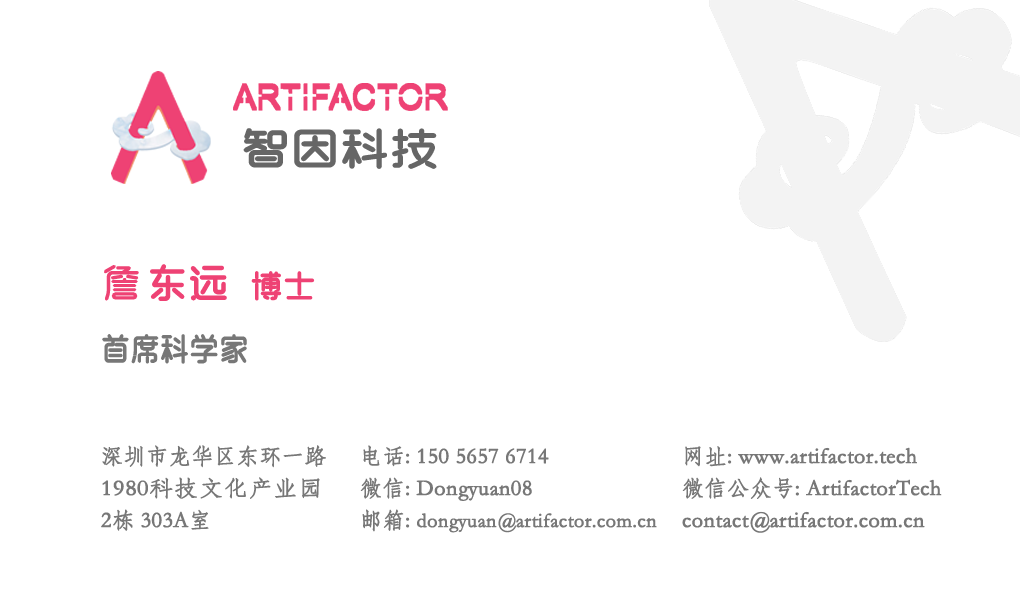
<style>
.page{position:relative;width:1020px;height:612px;background:#ffffff}
.page>*{position:absolute;margin:0}
.t1{font:44px "BENMOXuyuan";color:#666666;font-weight:bold;scale:1.1 1}
.t2{font:32px "BENMOXuyuan";color:#777777;font-weight:bold;scale:0.9 1}
.t3{font:40px "BENMOXuyuan";color:#ee4274}
.t4{font:40px "BENMOXuyuan";color:#ee4274;font-weight:bold}
.t5{font:32px "BENMOXuyuan";color:#ee4274;font-weight:bold}
.t6{font:22px/32px "STFangsong";color:#777777;font-weight:bold;scale:1.1 1}
.t7{font:22px/32px "STFangsong";color:#777777;font-weight:bold}
.t8{font:20px/32px "STFangsong";color:#777777;font-weight:bold}
</style>
<div class="page">
<p class="t1" style="left:243px;top:128px;width:194px;height:41px">智因科技</p>
<p class="t2" style="left:102px;top:264px;width:213px;height:100px"><span class="t3">詹 </span><span class="t4">东远 </span><span class="t5">博士<br></span>首席科学家</p>
<p class="t6" style="left:101px;top:445px;width:225px;height:86px"><span class="t7">深圳市龙华区东环一路<br></span>1980科技文化产业园<br><span class="t7">2栋 303A室</span></p>
<p class="t7" style="left:360px;top:445px;width:297px;height:88px">电话: 150 5657 6714<br>微信: Dongyuan08<br>邮箱: <span class="t8">dongyuan@artifactor.com.cn</span></p>
<p class="t7" style="left:682px;top:446px;width:260px;height:87px">网址: www.artifactor.tech<br>微信公众号: ArtifactorTech<br>contact@artifactor.com.cn</p>
</div>
